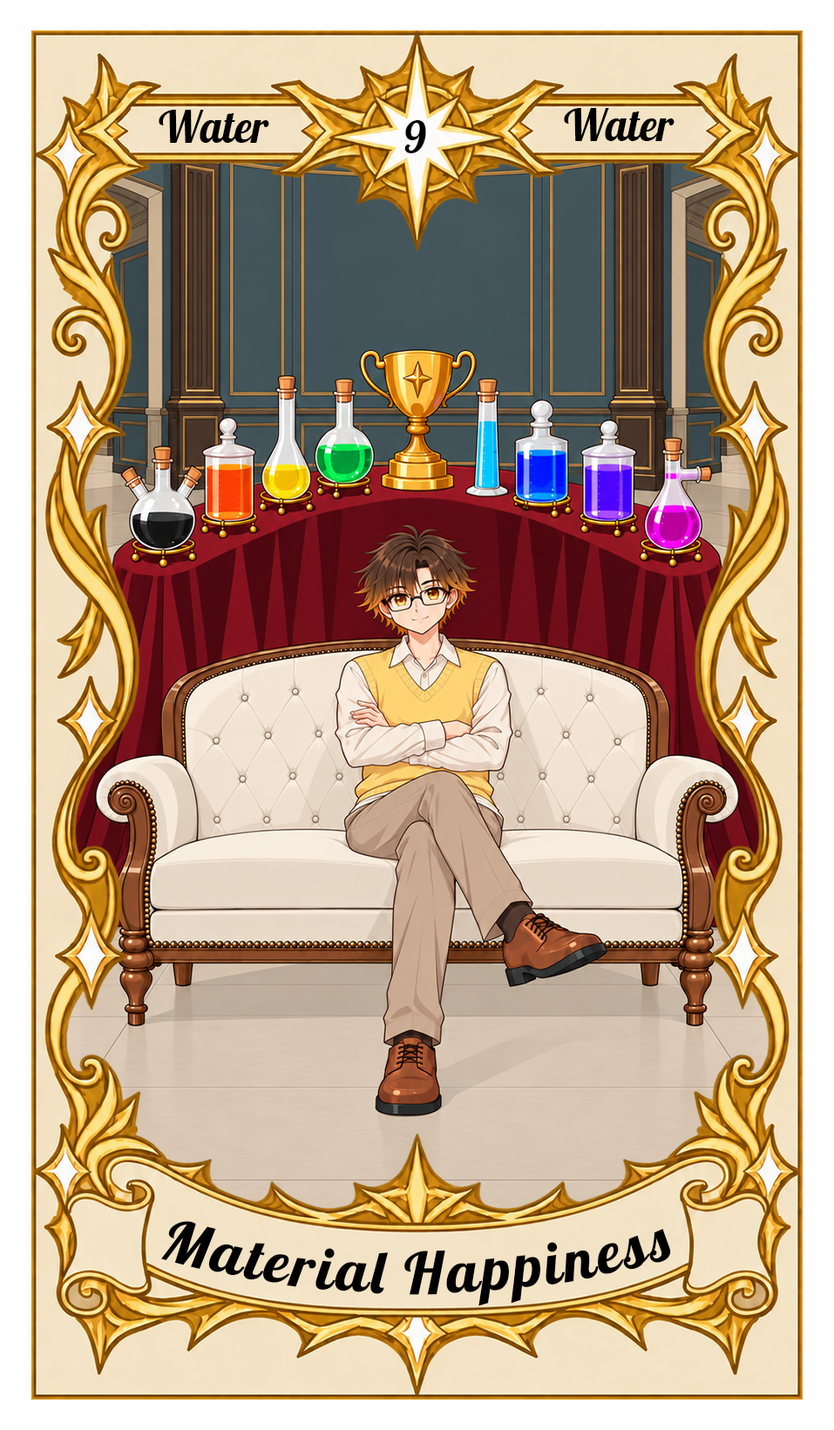
<style>
.page{position:relative;width:834px;height:1430px}
.page>*{position:absolute;margin:0}
.t1{font:43.6px "Lobster-Regular";color:#000000}
.t2{font:58.1px "Lobster-Regular";letter-spacing:0.05em;color:#000000}
</style>
<div class="page">
<p class="t1" style="left:159px;top:110px;width:110px;height:33px">Water</p>
<p class="t1" style="left:564px;top:108px;width:110px;height:33px">Water</p>
<p class="t1" style="left:404px;top:120px;width:22px;height:33px">9</p>
<p class="t2" style="left:161px;top:1221px;width:510px;height:86px">Material Happiness</p>
</div>
